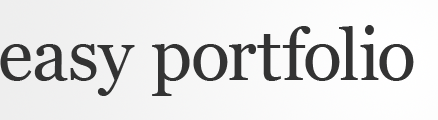
<style>
.page{position:relative;width:438px;height:120px}
.page>*{position:absolute;margin:0}
.t1{font:72px "Georgia";color:#333333}
</style>
<div class="page">
<p class="t1" style="left:0px;top:25px;width:414px;height:71px">easy portfolio</p>
</div>
